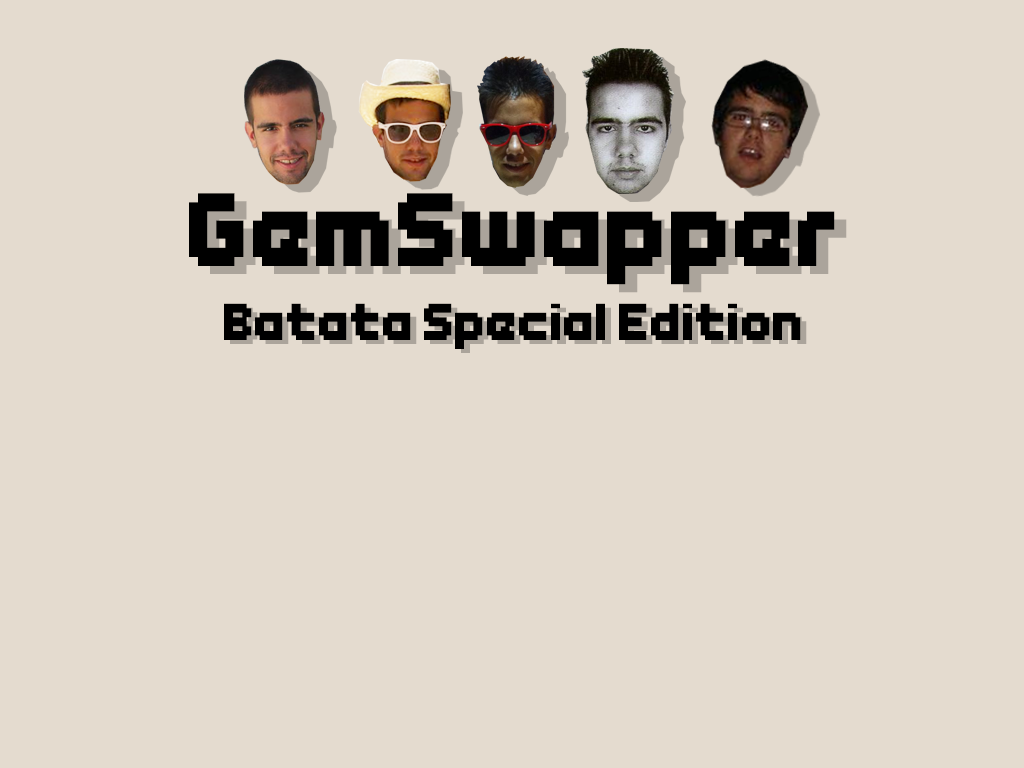
<style>
.page{position:relative;width:1024px;height:768px;background:#e4dbcf}
.page>*{position:absolute;margin:0}
.t1{font:100px "Endless-Boss-Battle";color:#000000}
.t2{font:12px "Endless-Boss-Battle";color:#000000}
</style>
<div class="page">
<p class="t1" style="left:189px;top:193px;width:646px;height:92px">GemSwapper</p>
<p class="t2" style="left:224px;top:303px;width:577px;height:46px;text-align:center">Batata Special Edition</p>
</div>
